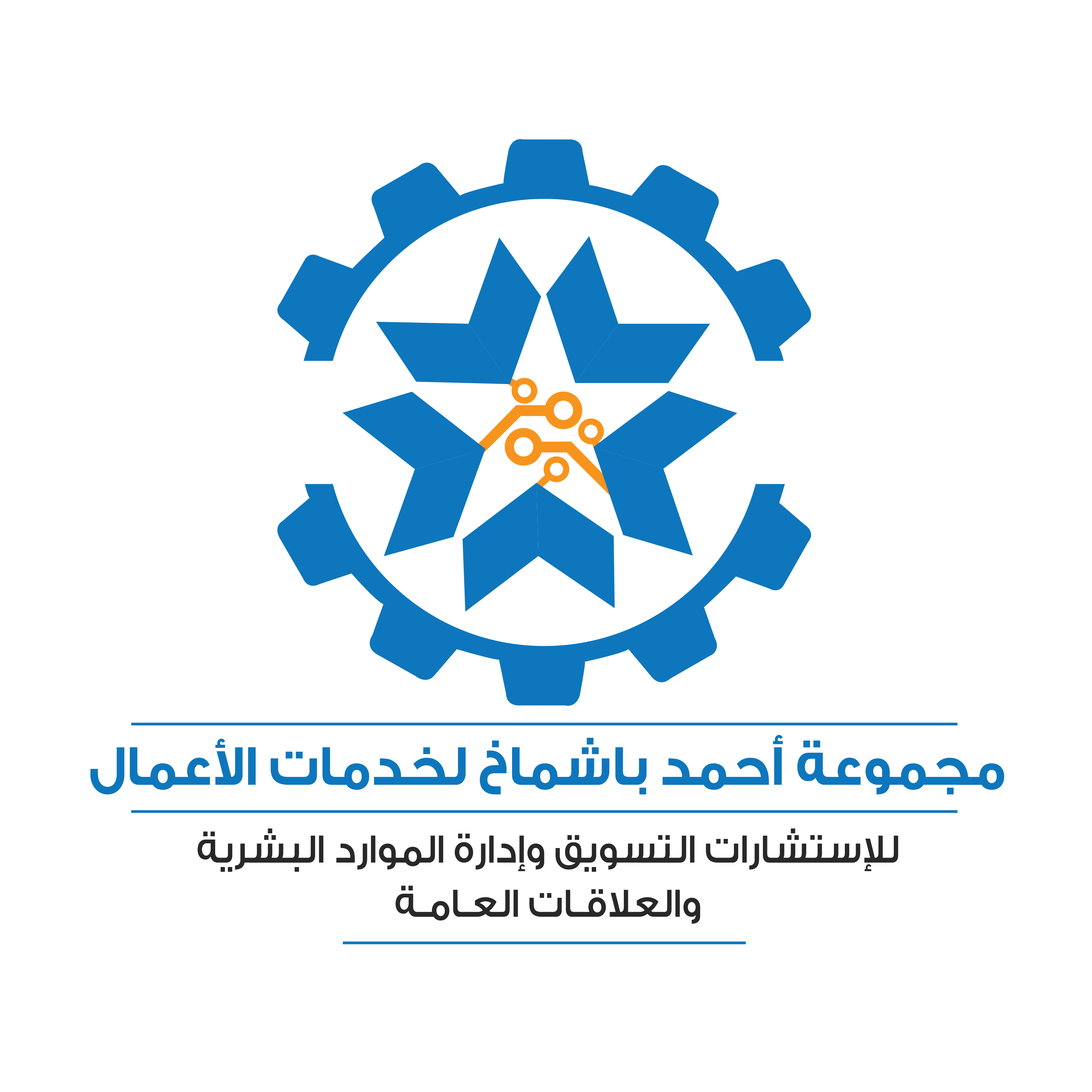
<style>
.page{position:relative;width:1092px;height:1092px;background:#ffffff}
.page>*{position:absolute;margin:0}
.t1{font:58.1px "GESSTwoBold-Bold";color:#0e76bc;scale:0.92 1}
.t2{font:41.7px "GESSTwoMedium-Medium";color:#282828;scale:0.92 1}
</style>
<div class="page">
<p class="t1" style="left:90px;top:735px;width:914px;height:59px">مجموعة أحمد باشماخ لخدمات الأعمال</p>
<p class="t2" style="left:197px;top:828px;width:701px;height:44px">للإستشارات التسويق وإدارة الموارد البشرية</p>
<p class="t2" style="left:395px;top:886px;width:305px;height:38px">والعلاقـات العـامـة</p>
</div>
